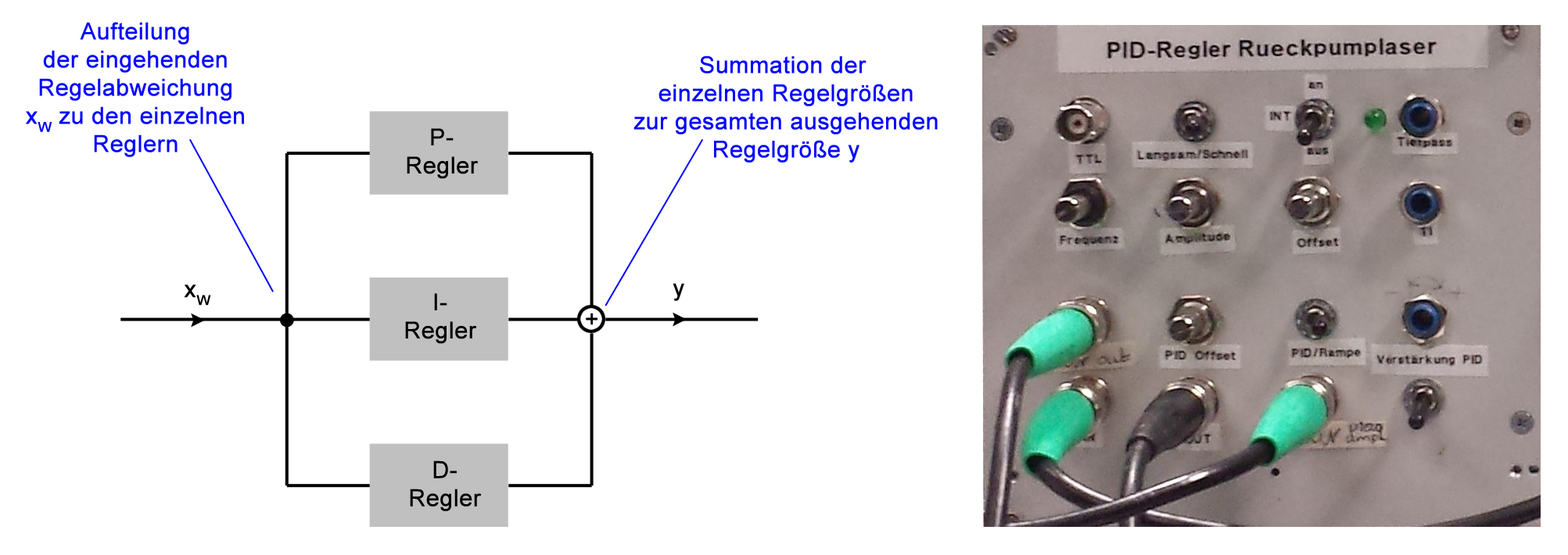
<style>
.page{position:relative;width:1568px;height:555px;background:#ffffff}
.page>*{position:absolute;margin:0}
.t1{font:23.5px "ArialMT";color:#0404ff;font-weight:bold}
.t2{font:23.5px "ArialMT";color:#000000;font-weight:bold}
</style>
<div class="page">
<p class="t1" style="left:26px;top:22px;width:218px;height:135px;text-align:center">Aufteilung<br>der eingehenden<br>Regelabweichung<br>xW zu den einzelnen<br>Reglern</p>
<p class="t1" style="left:633px;top:56px;width:305px;height:107px;text-align:center">Summation der <br>einzelnen Regelgrößen<br>zur gesamten ausgehenden<br>Regelgröße y</p>
<p class="t2" style="left:407px;top:128px;width:72px;height:51px;text-align:center">P-<br>Regler</p>
<p class="t2" style="left:184px;top:285px;width:27px;height:21px">xW</p>
<p class="t2" style="left:405px;top:293px;width:72px;height:51px;text-align:center">I-<br>Regler</p>
<p class="t2" style="left:673px;top:283px;width:11px;height:18px">y</p>
<p class="t2" style="left:410px;top:461px;width:72px;height:50px;text-align:center">D-<br>Regler</p>
</div>
